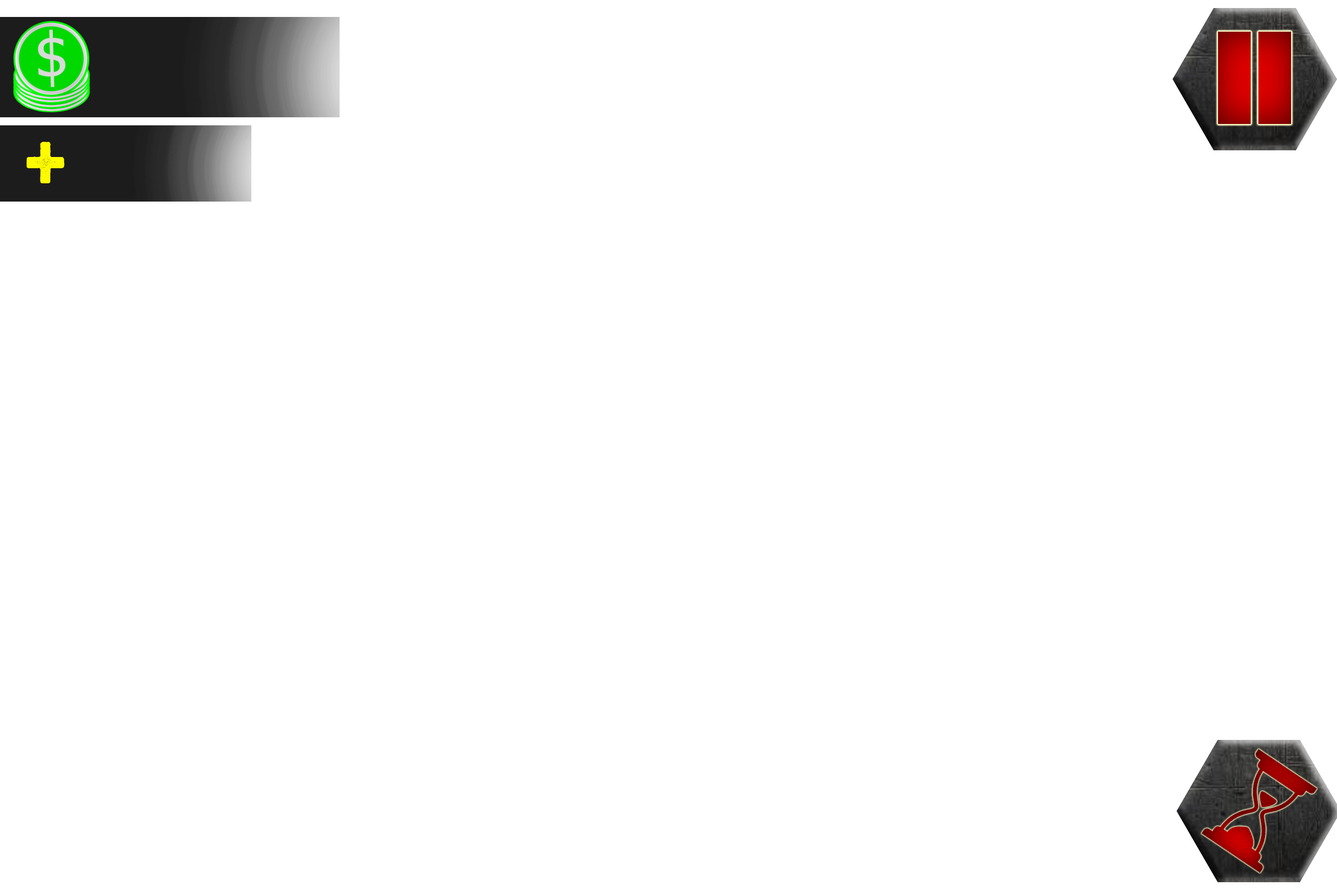
<style>
.page{position:relative;width:1337px;height:892px;background:#ffffff}
.page>*{position:absolute;margin:0}
.t1{font:81.4px "Iron&Brine";color:#fefb00}
</style>
<div class="page">
<p class="t1" style="left:26px;top:142px;width:39px;height:41px">+</p>
</div>
